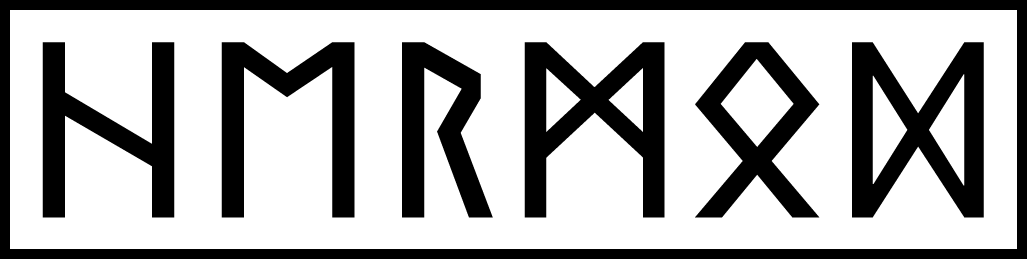
<style>
.page{position:relative;width:1027px;height:259px;background:#ffffff}
.page>*{position:absolute;margin:0}
.t1{font:245px "NotoSansRunic-Regular";color:#000000}
</style>
<div class="page">
<p class="t1" style="left:42px;top:42px;width:942px;height:176px">ᚺᛖᚱᛗᛟᛞ</p>
</div>
